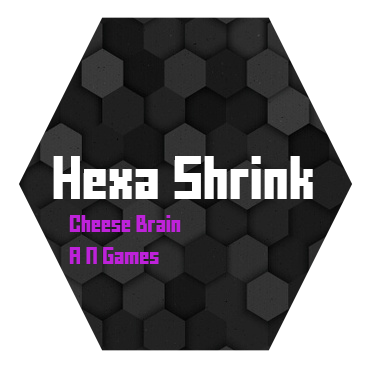
<style>
.page{position:relative;width:371px;height:368px;background:#ffffff}
.page>*{position:absolute;margin:0}
.t1{font:34.5px "FFFForward";color:#ffffff}
.t2{font:13.3px "FFFForward";color:#be22d9}
</style>
<div class="page">
<p class="t1" style="left:53px;top:156px;width:260px;height:43px">Hexa Shrink</p>
<p class="t2" style="left:69px;top:215px;width:112px;height:49px">Cheese Brain<br><br>A N Games</p>
</div>
